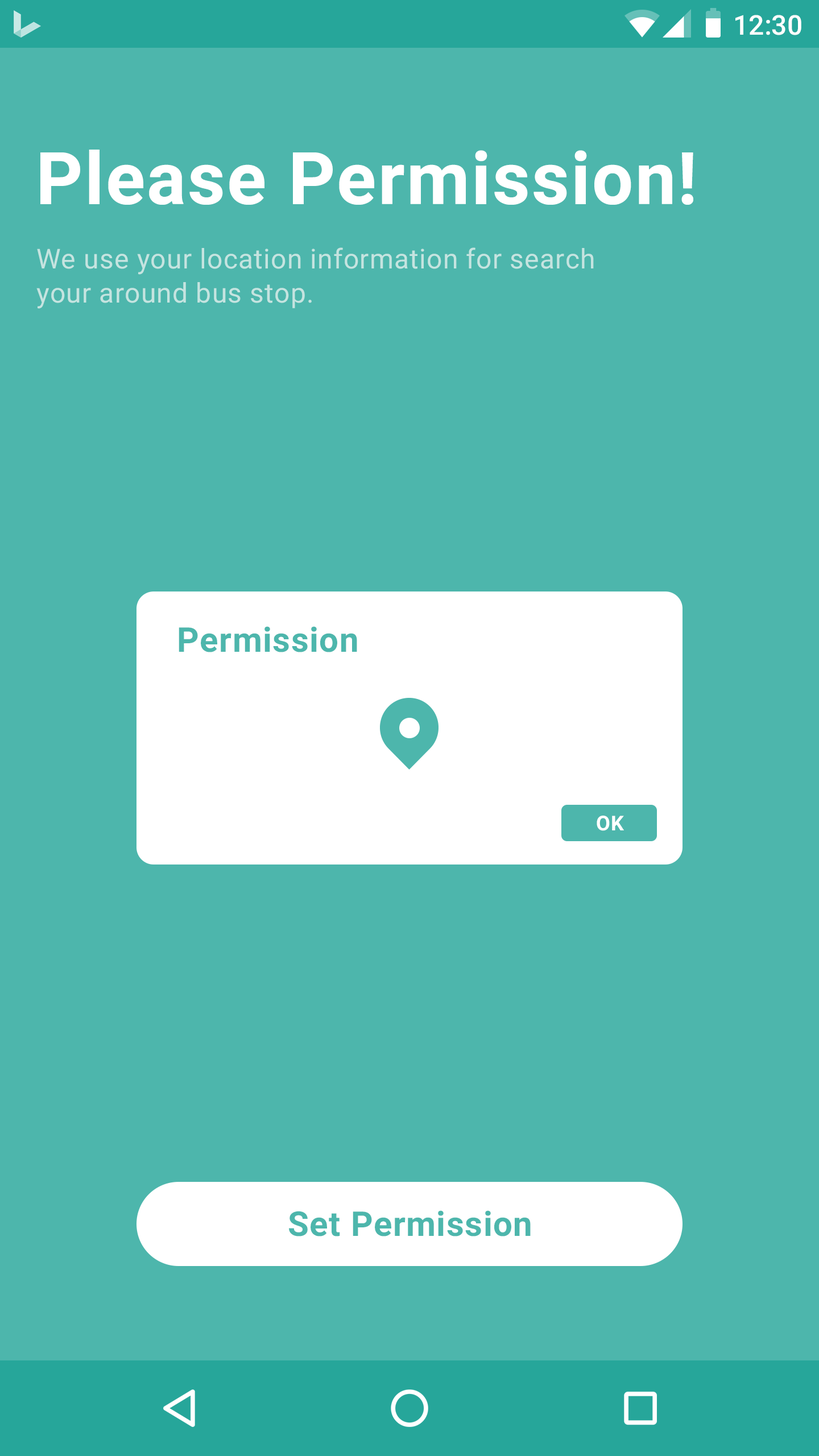
<style>
.page{position:relative;width:819px;height:1456px;background:#4db6ac}
.page>*{position:absolute;margin:0}
.t1{font:27.3px "Roboto-Medium";color:#ffffff}
.t2{font:72.8px "Roboto-Bold";letter-spacing:0.025em;color:#ffffff}
.t3{font:27.3px/34.1px "Roboto-Regular";letter-spacing:0.025em;color:#c5e4e0}
.t4{font:34.1px "Roboto-Bold";letter-spacing:0.025em;color:#4db6ac}
.t5{font:20.5px "Roboto-Bold";letter-spacing:0.025em;color:#ffffff}
</style>
<div class="page">
<p class="t1" style="left:735px;top:15px;width:66px;height:20px">12:30</p>
<p class="t2" style="left:40px;top:150px;width:653px;height:55px">Please Permission!</p>
<p class="t3" style="left:36px;top:247px;width:558px;height:62px">We use your location information for search<br>your around bus stop.</p>
<p class="t4" style="left:179px;top:626px;width:178px;height:26px">Permission</p>
<p class="t5" style="left:597px;top:816px;width:27px;height:15px">OK</p>
<p class="t4" style="left:289px;top:1210px;width:242px;height:26px">Set Permission</p>
</div>
